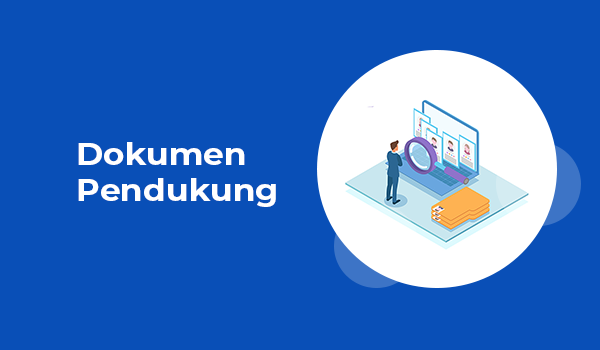
<style>
.page{position:relative;width:600px;height:350px;background:#094fb7}
.page>*{position:absolute;margin:0}
.t1{font:30px "Montserrat-Bold";color:#ffffff;scale:1.1 1}
</style>
<div class="page">
<p class="t1" style="left:78px;top:142px;width:198px;height:65px">Dokumen<br>Pendukung</p>
</div>
